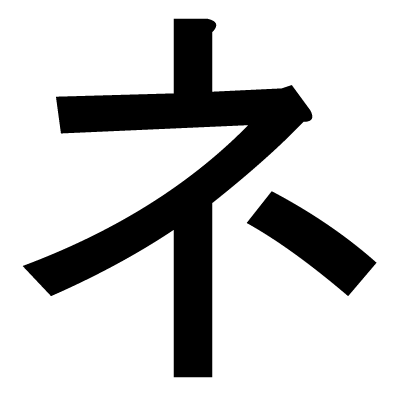
<style>
.page{position:relative;width:400px;height:400px;background:#ffffff}
.page>*{position:absolute;margin:0}
.t1{font:424.8px "MS-PGothic";color:#000000}
</style>
<div class="page">
<p class="t1" style="left:22px;top:18px;width:355px;height:360px">ネ</p>
</div>
